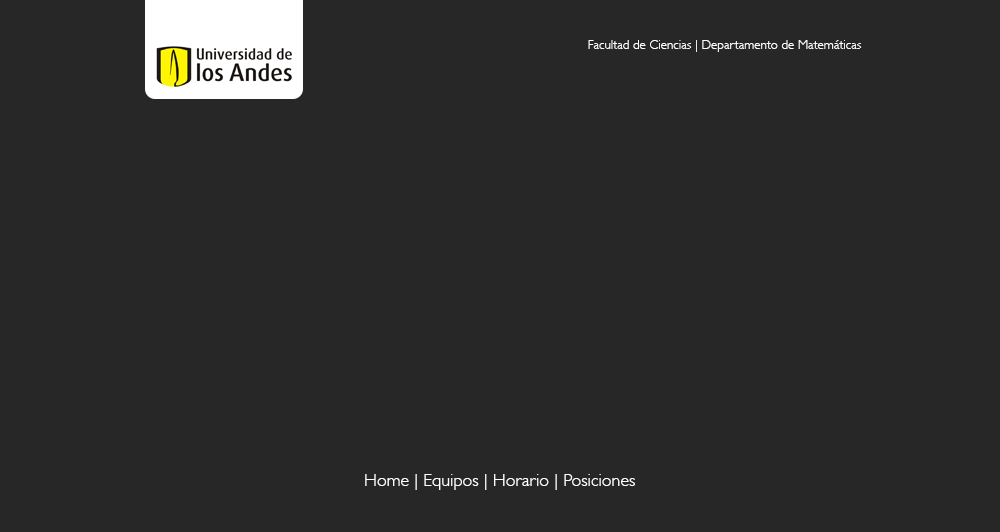
<style>
.page{position:relative;width:1000px;height:532px;background:#272727}
.page>*{position:absolute;margin:0}
.t1{font:13px "GillSans-Light";color:#ffffff}
.t2{font:18px "GillSans-Light";color:#ffffff}
</style>
<div class="page">
<p class="t1" style="left:588px;top:40px;width:274px;height:12px">Facultad de Ciencias | Departamento de Matemáticas</p>
<p class="t2" style="left:365px;top:474px;width:270px;height:16px">Home | Equipos | Horario | Posiciones</p>
</div>
